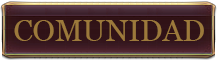
<style>
.page{position:relative;width:218px;height:60px}
.page>*{position:absolute;margin:0}
.t1{font:30px "Georgia";color:#9c793b}
</style>
<div class="page">
<p class="t1" style="left:14px;top:20px;width:190px;height:21px">COMUNIDAD</p>
</div>
